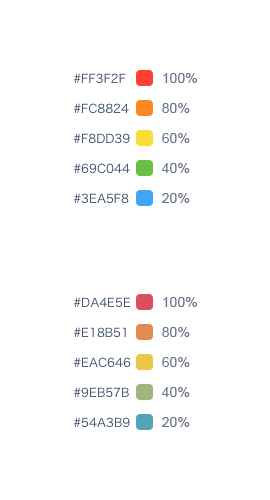
<style>
.page{position:relative;width:270px;height:500px;background:#ffffff}
.page>*{position:absolute;margin:0}
.t1{font:12px "HiraginoSansGB-W3";color:#384b66;text-transform:uppercase}
.t2{font:14px "ArialMT";color:#66728c}
</style>
<div class="page">
<p class="t1" style="left:74px;top:73px;width:52px;height:11px">#ff3f2f</p>
<p class="t2" style="left:163px;top:73px;width:34px;height:10px">100%</p>
<p class="t1" style="left:74px;top:103px;width:55px;height:11px">#fc8824</p>
<p class="t2" style="left:162px;top:103px;width:28px;height:10px">80%</p>
<p class="t1" style="left:74px;top:133px;width:56px;height:11px">#f8dd39</p>
<p class="t2" style="left:162px;top:133px;width:28px;height:10px">60%</p>
<p class="t1" style="left:74px;top:163px;width:56px;height:11px">#69c044</p>
<p class="t2" style="left:161px;top:163px;width:29px;height:10px">40%</p>
<p class="t1" style="left:74px;top:193px;width:55px;height:11px">#3ea5f8</p>
<p class="t2" style="left:162px;top:193px;width:28px;height:10px">20%</p>
<p class="t1" style="left:74px;top:297px;width:57px;height:11px">#da4e5e</p>
<p class="t2" style="left:163px;top:297px;width:34px;height:10px">100%</p>
<p class="t1" style="left:74px;top:327px;width:52px;height:11px">#e18b51</p>
<p class="t2" style="left:162px;top:327px;width:28px;height:10px">80%</p>
<p class="t1" style="left:74px;top:357px;width:57px;height:11px">#eac646</p>
<p class="t2" style="left:162px;top:357px;width:28px;height:10px">60%</p>
<p class="t1" style="left:74px;top:387px;width:55px;height:11px">#9eb57b</p>
<p class="t2" style="left:161px;top:387px;width:29px;height:10px">40%</p>
<p class="t1" style="left:74px;top:417px;width:56px;height:11px">#54a3b9</p>
<p class="t2" style="left:162px;top:417px;width:28px;height:10px">20%</p>
</div>
